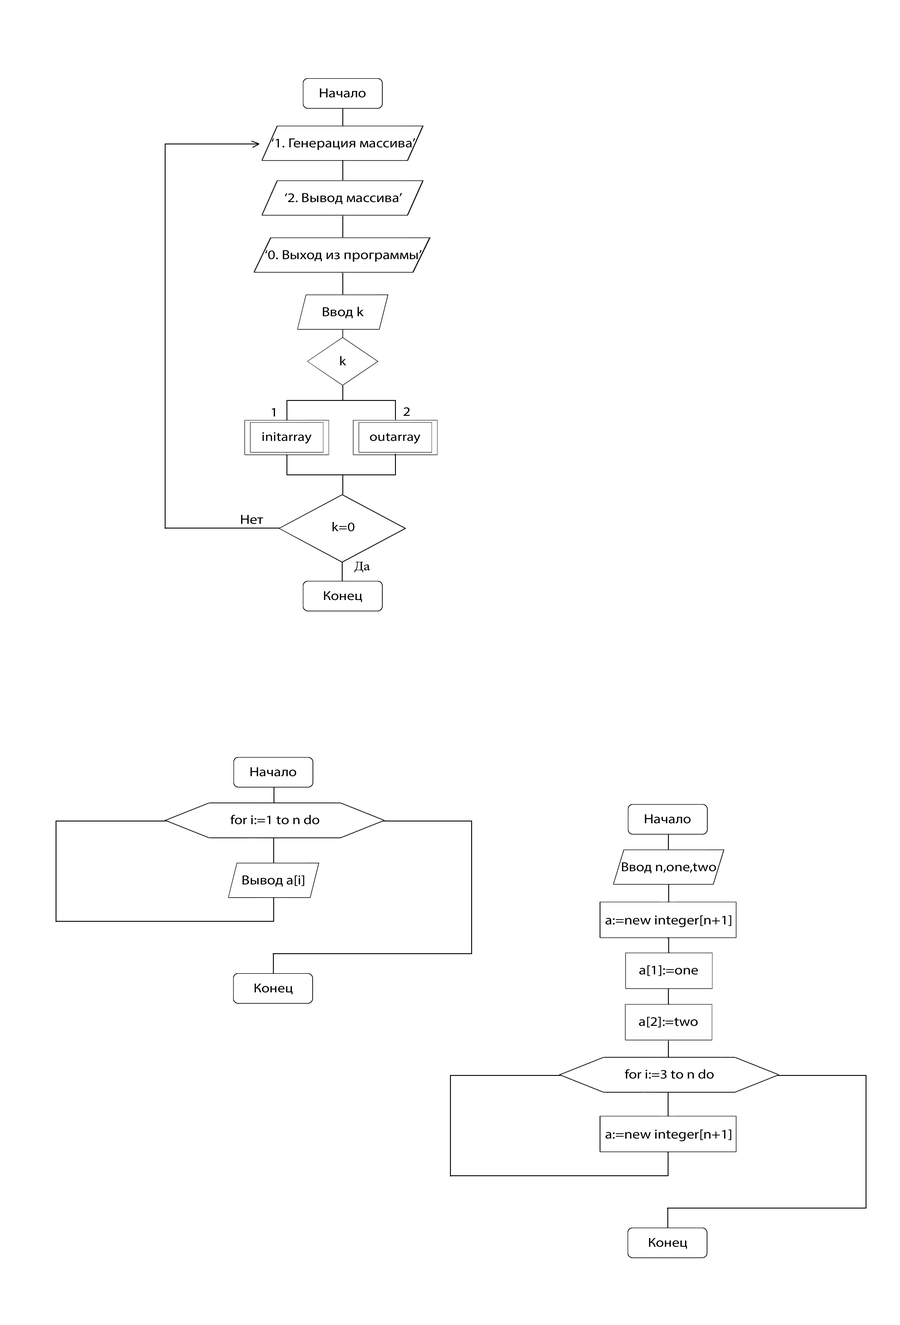
<style>
.page{position:relative;width:900px;height:1325px;background:#ffffff}
.page>*{position:absolute;margin:0}
.t1{font:13.2px "MyriadPro-Regular";color:#000000;scale:1.14 1}
.t2{font:12.9px "MyriadPro-Regular";color:#000000;scale:1.14 1}
.t3{font:12.8px "MyriadPro-Regular";color:#000000;scale:1.14 1}
.t4{font:13.2px "MyriadPro-Regular";color:#000000;scale:1.13 1}
</style>
<div class="page">
<p class="t1" style="left:320px;top:88px;width:46px;height:10px">Начало</p>
<p class="t1" style="left:271px;top:138px;width:144px;height:12px">‘1. Генерация массива’</p>
<p class="t1" style="left:285px;top:193px;width:117px;height:11px">‘2. Вывод массива’</p>
<p class="t1" style="left:265px;top:250px;width:157px;height:12px">‘0. Выход из программы’</p>
<p class="t1" style="left:323px;top:307px;width:41px;height:11px">Ввод k</p>
<p class="t2" style="left:340px;top:356px;width:6px;height:9px">k</p>
<p class="t2" style="left:272px;top:408px;width:3px;height:8px">1</p>
<p class="t2" style="left:404px;top:407px;width:6px;height:9px">2</p>
<p class="t3" style="left:262px;top:432px;width:49px;height:12px">initarray</p>
<p class="t3" style="left:370px;top:433px;width:50px;height:11px">outarray</p>
<p class="t4" style="left:241px;top:515px;width:22px;height:9px">Нет</p>
<p class="t2" style="left:332px;top:522px;width:22px;height:9px">k=0</p>
<p class="t2" style="left:324px;top:591px;width:38px;height:11px">Конец</p>
<p class="t1" style="left:250px;top:767px;width:46px;height:9px">Начало</p>
<p class="t2" style="left:230px;top:815px;width:89px;height:9px">for i:=1 to n do</p>
<p class="t1" style="left:645px;top:814px;width:46px;height:10px">Начало</p>
<p class="t2" style="left:622px;top:862px;width:94px;height:11px">Ввод n,one,two</p>
<p class="t1" style="left:242px;top:875px;width:62px;height:11px">Вывод a[i]</p>
<p class="t1" style="left:605px;top:915px;width:126px;height:12px">a:=new integer[n+1]</p>
<p class="t1" style="left:639px;top:965px;width:59px;height:11px">a[1]:=one</p>
<p class="t2" style="left:254px;top:984px;width:39px;height:10px">Конец</p>
<p class="t1" style="left:639px;top:1017px;width:59px;height:11px">a[2]:=two</p>
<p class="t2" style="left:625px;top:1069px;width:89px;height:10px">for i:=3 to n do</p>
<p class="t1" style="left:605px;top:1129px;width:126px;height:12px">a:=new integer[n+1]</p>
<p class="t2" style="left:649px;top:1238px;width:38px;height:11px">Конец</p>
</div>
